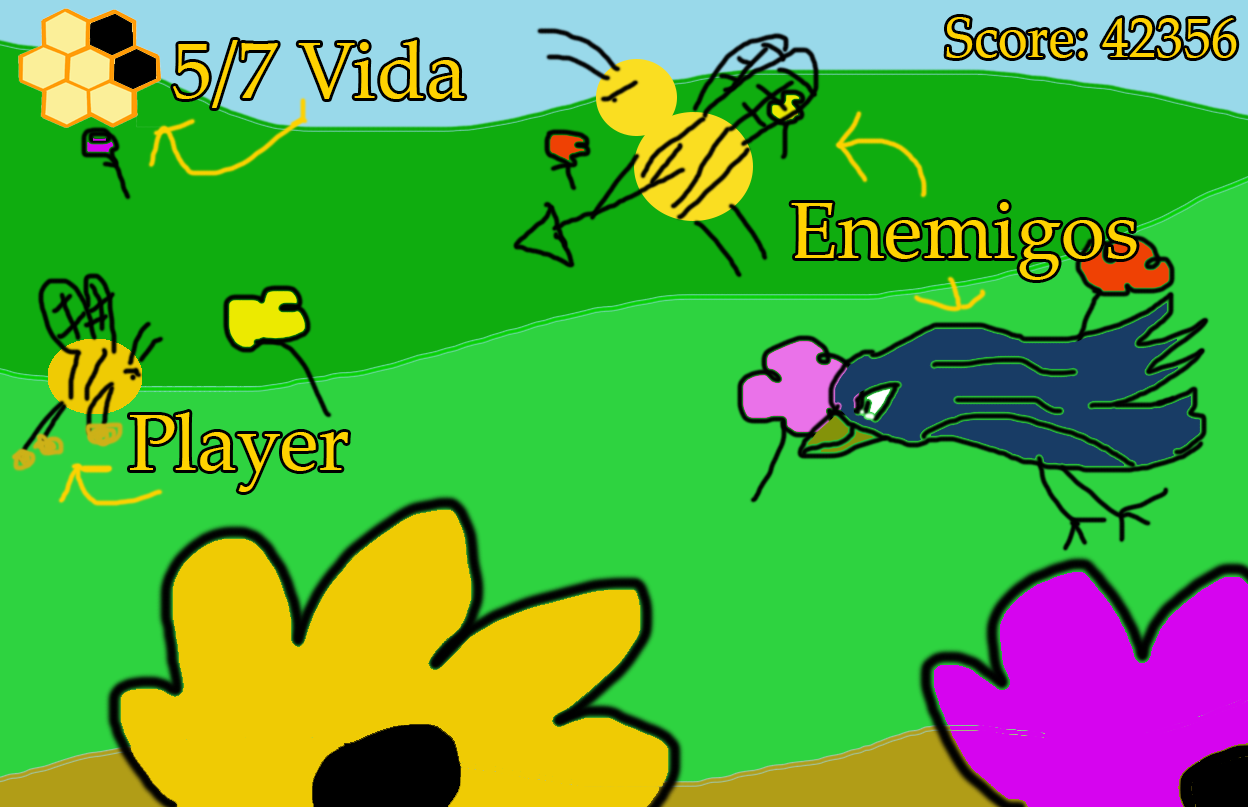
<style>
.page{position:relative;width:1248px;height:807px;background:#2ed340}
.page>*{position:absolute;margin:0}
.t1{font:57.4px "PalatinoLinotype-Roman";color:#ffd200;scale:0.95 1}
.t2{font:80px "PalatinoLinotype-Roman";color:#ffd200}
</style>
<div class="page">
<p class="t1" style="left:946px;top:17px;width:291px;height:41px">Score: 42356</p>
<p class="t2" style="left:173px;top:40px;width:292px;height:68px">5/7 Vida</p>
<p class="t2" style="left:791px;top:202px;width:346px;height:78px">Enemigos</p>
<p class="t2" style="left:130px;top:412px;width:218px;height:80px">Player</p>
</div>
